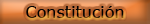
<style>
.page{position:relative;width:150px;height:24px}
.page>*{position:absolute;margin:0}
.t1{font:16px "Verdana"}
</style>
<div class="page">
<p class="t1" style="left:26px;top:6px;width:98px;height:12px">Constitución</p>
</div>
